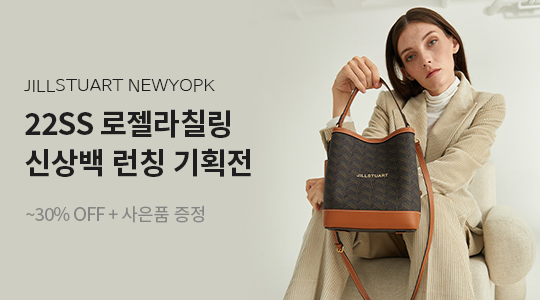
<style>
.page{position:relative;width:540px;height:300px;background:#cecec2}
.page>*{position:absolute;margin:0}
.t1{font:16px "NanumBarunGothicLight";letter-spacing:0.015em;color:#1e1e1e;scale:1.1 1}
.t2{font:30px "NotoSansKR-Bold";letter-spacing:-0.03em;color:#1e1e1e}
.t3{font:18px "NotoSansKR-Regular";letter-spacing:-0.03em;color:#868685}
</style>
<div class="page">
<p class="t1" style="left:24px;top:79px;width:191px;height:13px">JILLSTUART NEWYOPK</p>
<p class="t2" style="left:25px;top:109px;width:205px;height:29px">22SS 로젤라칠링</p>
<p class="t2" style="left:25px;top:148px;width:226px;height:29px">신상백 런칭 기획전</p>
<p class="t3" style="left:26px;top:205px;width:178px;height:18px">~30% OFF + 사은품 증정</p>
</div>
